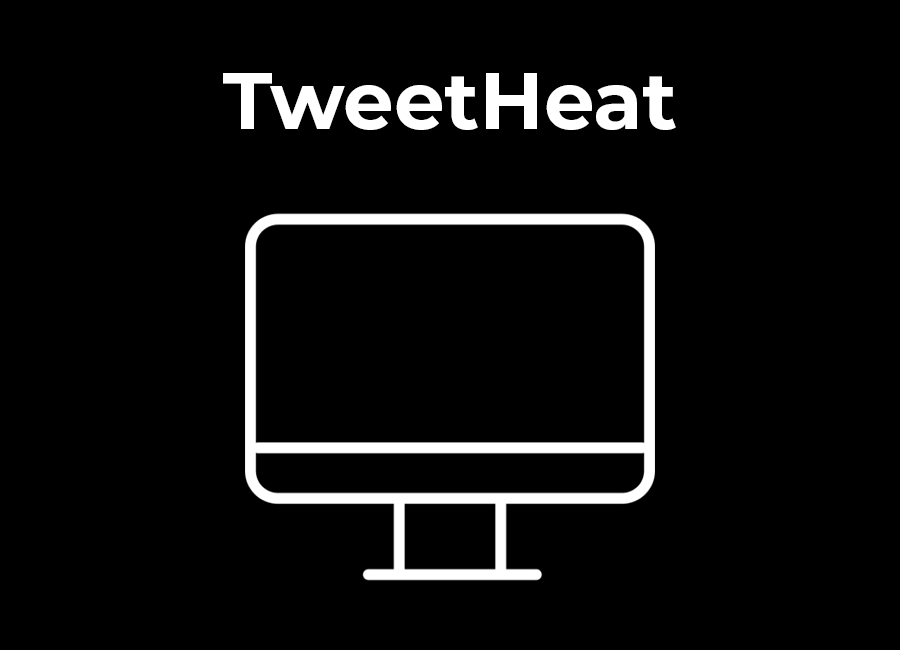
<style>
.page{position:relative;width:900px;height:650px;background:#000000}
.page>*{position:absolute;margin:0}
.t1{font:80px "Montserrat-Bold";color:#ffffff}
</style>
<div class="page">
<p class="t1" style="left:223px;top:73px;width:453px;height:57px">TweetHeat</p>
</div>
